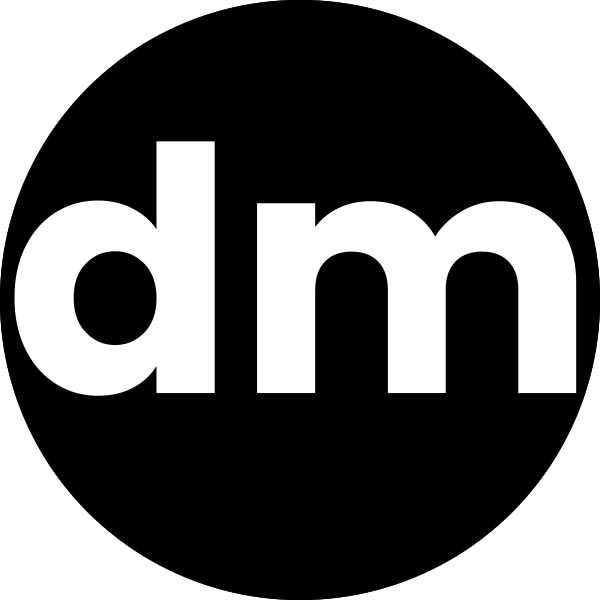
<style>
.page{position:relative;width:600px;height:600px;background:#000000}
.page>*{position:absolute;margin:0}
.t1{font:340px "Poppins-Bold";color:#ffffff}
</style>
<div class="page">
<p class="t1" style="left:14px;top:141px;width:563px;height:255px">dm</p>
</div>
